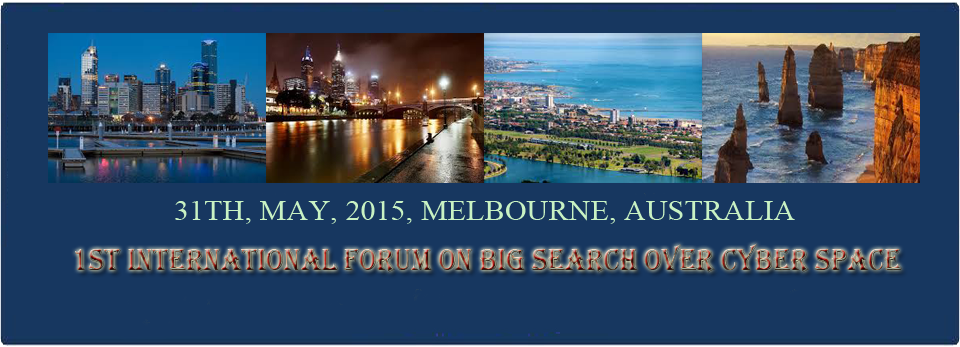
<style>
.page{position:relative;width:960px;height:347px;background:#173760}
.page>*{position:absolute;margin:0}
.t1{font:28.3px "TimesNewRomanPSMT";color:#c9f2c3;scale:1.07 1}
.t2{font:32px "Algerian";scale:0.87 1}
</style>
<div class="page">
<p class="t1" style="left:175px;top:201px;width:620px;height:23px">31TH, MAY, 2015, MELBOURNE, AUSTRALIA</p>
<p class="t2" style="left:75px;top:243px;width:827px;height:30px">1st International Forum on Big Search over Cyber Space</p>
</div>
